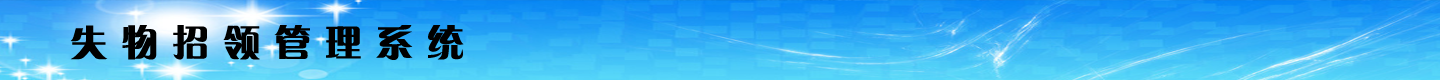
<style>
.page{position:relative;width:1440px;height:80px}
.page>*{position:absolute;margin:0}
.t1{font:36px "FZCQJW--GB1-0";letter-spacing:0.39em;color:#000000;font-weight:bold}
</style>
<div class="page">
<p class="t1" style="left:70px;top:25px;width:394px;height:35px">失物招领管理系统</p>
</div>
